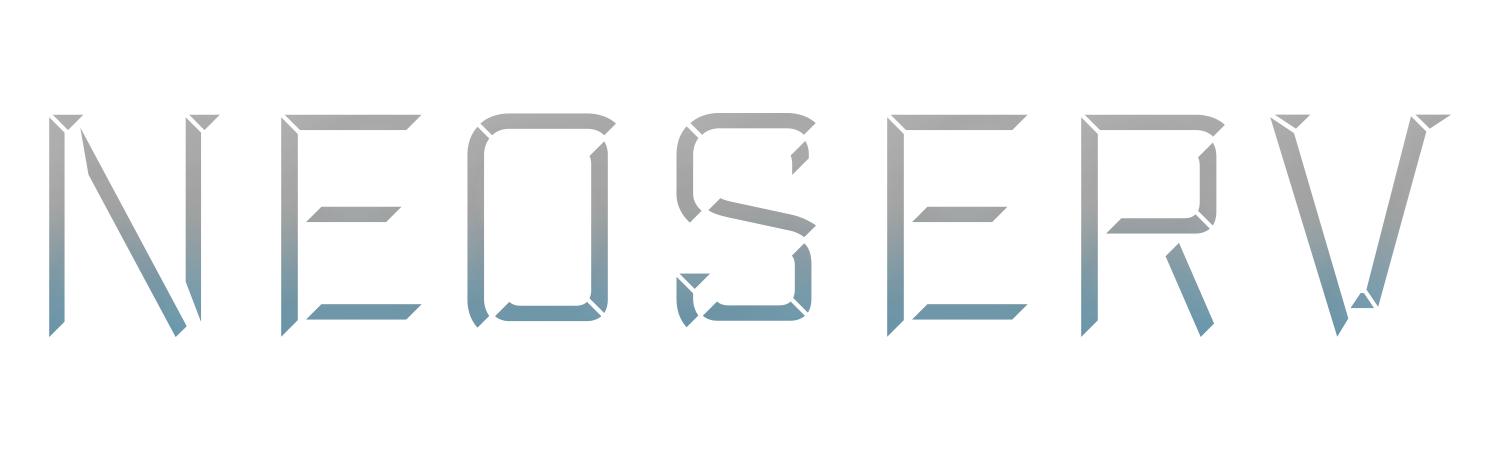
<style>
.page{position:relative;width:1500px;height:450px;background:#ffffff}
.page>*{position:absolute;margin:0}
.t1{font:325px "IndustryInc-BevelFill"}
</style>
<div class="page">
<p class="t1" style="left:49px;top:113px;width:1402px;height:224px">NeoServ</p>
</div>
